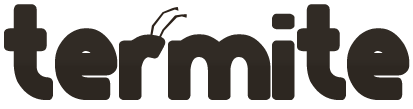
<style>
.page{position:relative;width:413px;height:109px;background:#ffffff}
.page>*{position:absolute;margin:0}
.t1{font:128.6px "LMAO";color:#2d2721}
</style>
<div class="page">
<p class="t1" style="left:4px;top:4px;width:406px;height:96px">termite</p>
</div>
